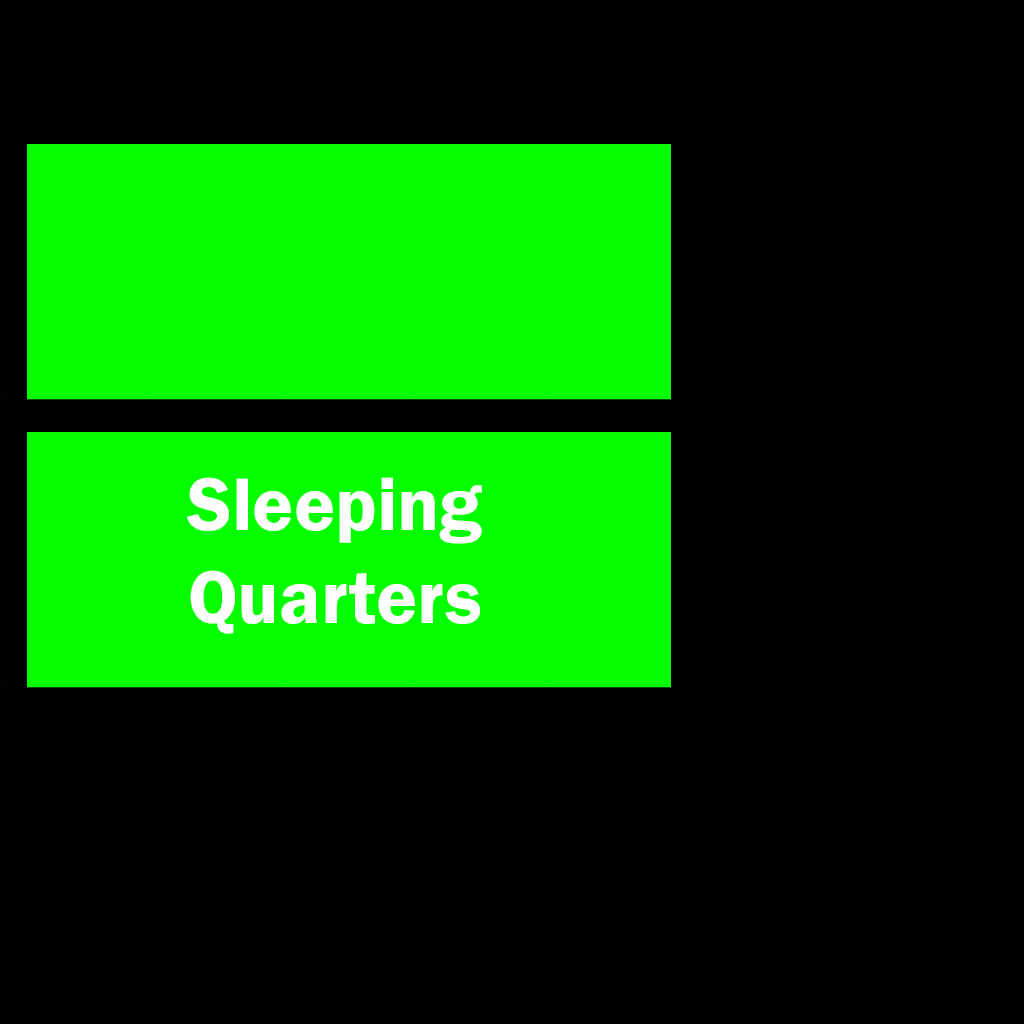
<style>
.page{position:relative;width:1024px;height:1024px;background:#000000}
.page>*{position:absolute;margin:0}
.t1{font:76.9px "FranklinGothic-Demi";color:#ffffff}
</style>
<div class="page">
<p class="t1" style="left:187px;top:477px;width:295px;height:157px;text-align:center">Sleeping<br>Quarters</p>
</div>
